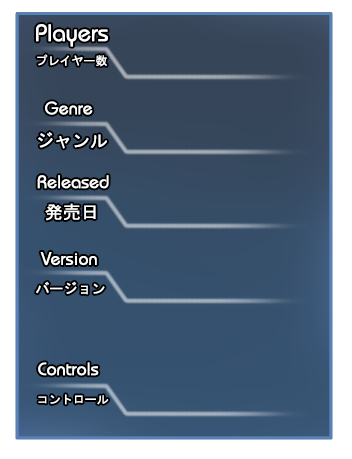
<style>
.page{position:relative;width:352px;height:459px}
.page>*{position:absolute;margin:0}
.t1{font:24px "ITCBauhaus-Medium";color:#ffffff}
.t2{font:12px "MS-Gothic";color:#ffffff}
.t3{font:18px "ITCBauhaus-Medium";color:#ffffff}
.t4{font:18px "MS-Gothic";color:#ffffff}
.t5{font:14px "MS-Gothic";color:#ffffff}
</style>
<div class="page">
<p class="t1" style="left:36px;top:24px;width:72px;height:23px">Players</p>
<p class="t2" style="left:37px;top:54px;width:70px;height:13px">プレイヤー数</p>
<p class="t3" style="left:45px;top:101px;width:48px;height:14px">Genre</p>
<p class="t4" style="left:38px;top:132px;width:69px;height:17px">ジャンル</p>
<p class="t3" style="left:37px;top:175px;width:72px;height:14px">Released</p>
<p class="t4" style="left:45px;top:203px;width:51px;height:18px">発売日</p>
<p class="t3" style="left:40px;top:252px;width:57px;height:14px">Version</p>
<p class="t5" style="left:36px;top:281px;width:69px;height:14px">バージョン</p>
<p class="t3" style="left:38px;top:362px;width:61px;height:14px">Controls</p>
<p class="t2" style="left:38px;top:394px;width:71px;height:11px">コントロール</p>
</div>
